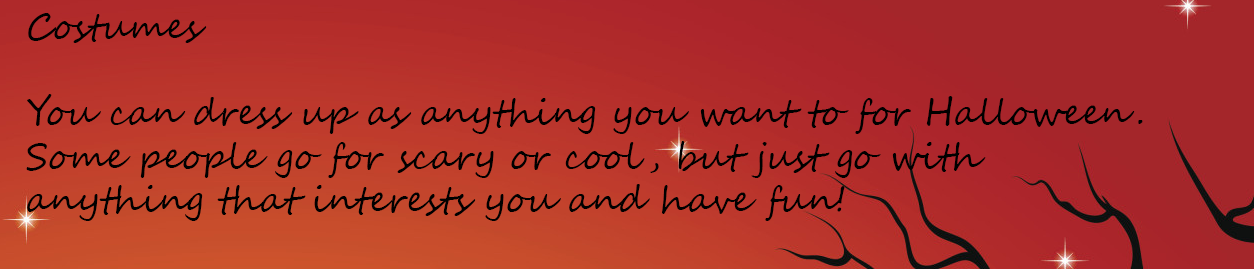
<style>
.page{position:relative;width:1254px;height:269px}
.page>*{position:absolute;margin:0}
.t1{font:36px "SegoeScript";color:#000000}
</style>
<div class="page">
<p class="t1" style="left:26px;top:13px;width:1117px;height:208px">Costumes<br><br>You can dress up as anything you want to for Halloween.<br>Some people go for scary or cool, but just go with <br>anything that interests you and have fun!</p>
</div>
